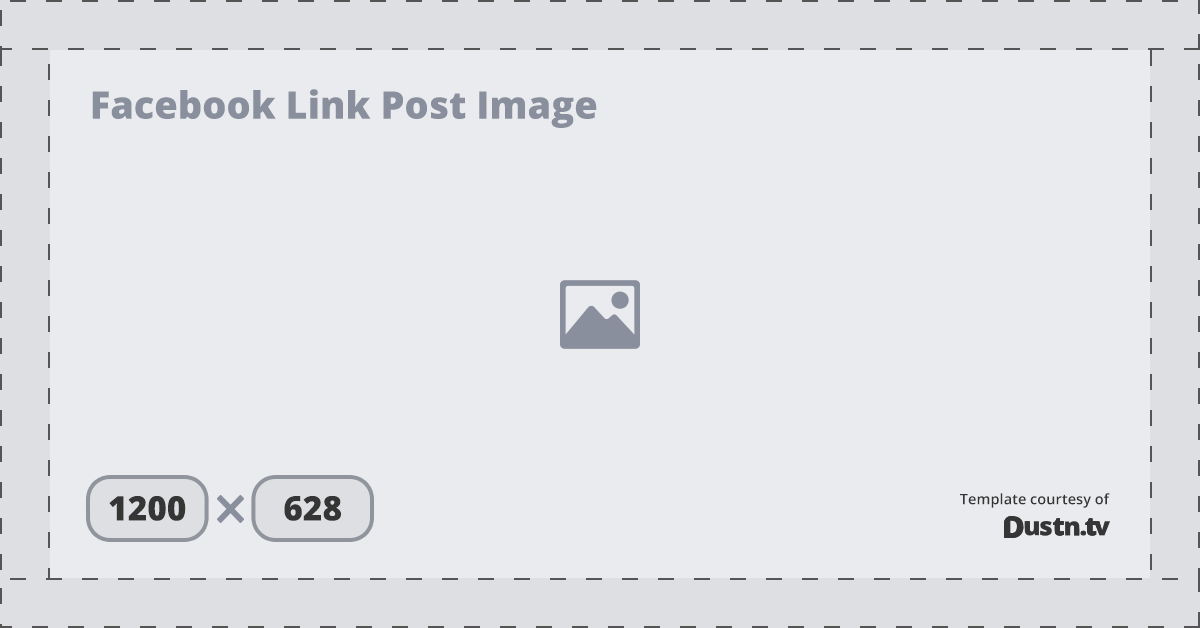
<style>
.page{position:relative;width:1200px;height:628px;background:#e9ebee}
.page>*{position:absolute;margin:0}
.t1{font:38px "OpenSans-Extrabold";color:#898f9c}
.t2{font:33.9px "OpenSans-Extrabold";color:#353535}
.t3{font:14.5px "OpenSans-Semibold";color:#353535}
</style>
<div class="page">
<p class="t1" style="left:92px;top:89px;width:505px;height:39px">Facebook Link Post Image</p>
<p class="t2" style="left:109px;top:496px;width:77px;height:25px">1200</p>
<p class="t2" style="left:284px;top:496px;width:57px;height:25px">628</p>
<p class="t3" style="left:960px;top:493px;width:150px;height:15px">Template courtesy of</p>
</div>
